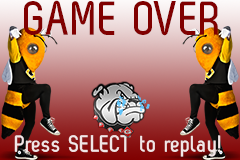
<style>
.page{position:relative;width:240px;height:160px}
.page>*{position:absolute;margin:0}
.t1{font:48px "ZagBold";letter-spacing:0.022em;color:#800000}
.t2{font:24px "ZagBold";letter-spacing:0.022em;color:#f2e6e6}
</style>
<div class="page">
<p class="t1" style="left:24px;top:0px;width:194px;height:36px">GAME OVER</p>
<p class="t2" style="left:14px;top:135px;width:207px;height:22px">Press SELECT to replay!</p>
</div>
